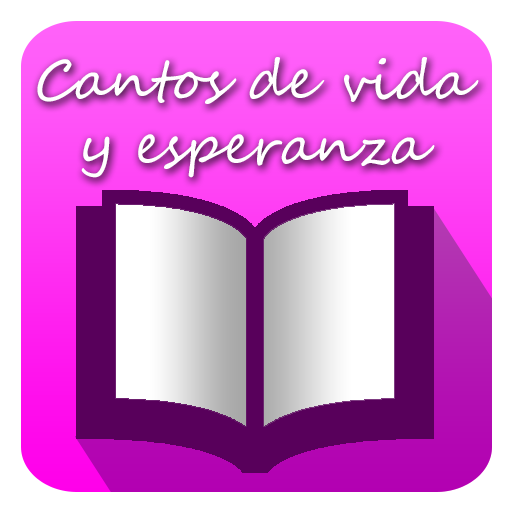
<style>
.page{position:relative;width:512px;height:512px;background:#ffffff}
.page>*{position:absolute;margin:0}
.t1{font:54.5px "SegoeScript";color:#ffffff}
</style>
<div class="page">
<p class="t1" style="left:37px;top:57px;width:442px;height:121px;text-align:center">Cantos de vida<br>y esperanza</p>
</div>
